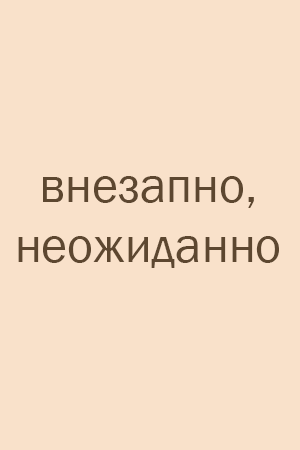
<style>
.page{position:relative;width:300px;height:450px;background:#f9e1ca}
.page>*{position:absolute;margin:0}
.t1{font:50px "FranklinGothic-Book";color:#5d4730}
</style>
<div class="page">
<p class="t1" style="left:18px;top:176px;width:261px;height:92px;text-align:center">внезапно,<br>неожиданно</p>
</div>
